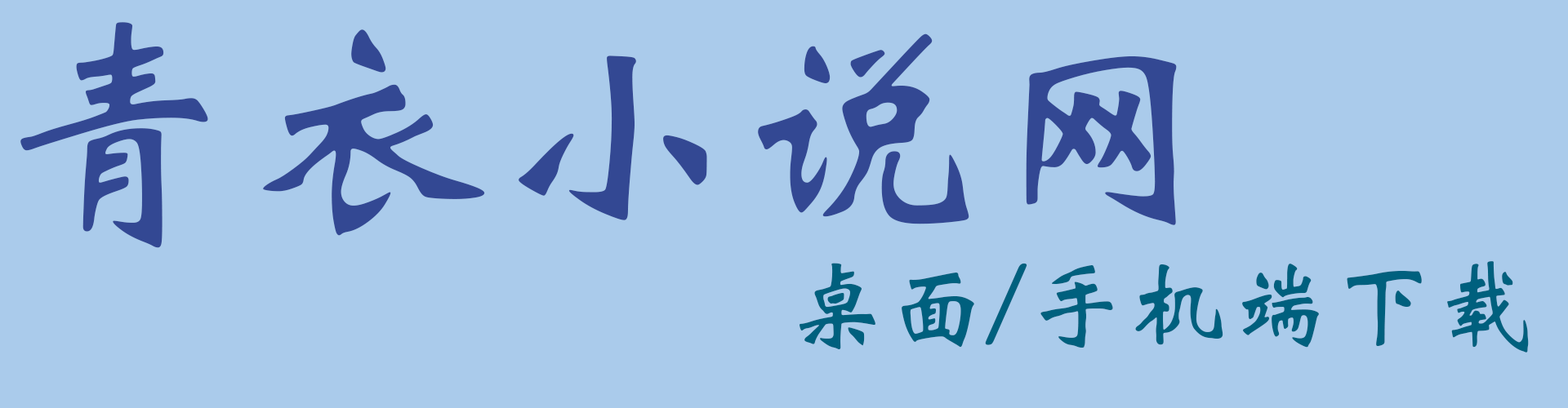
<style>
.page{position:relative;width:1568px;height:408px;background:#aacbeb}
.page>*{position:absolute;margin:0}
.t1{font:245px "STXinwei";color:#334893}
.t2{font:102.1px "STXinwei";color:#00607e}
</style>
<div class="page">
<p class="t1" style="left:20px;top:22px;width:1157px;height:226px">青衣小说网</p>
<p class="t2" style="left:800px;top:261px;width:729px;height:92px">桌面/手机端下载</p>
</div>
